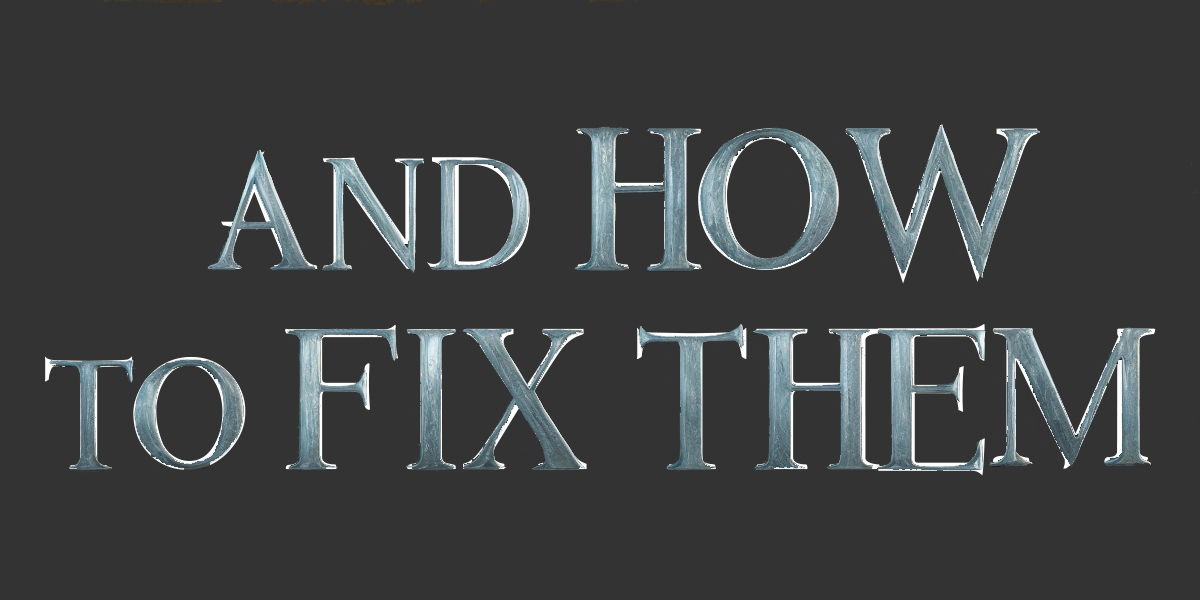
<style>
.page{position:relative;width:1200px;height:600px;background:#333333}
.page>*{position:absolute;margin:0}
.t1{font:166.7px "AnimalesFantastic"}
.t2{font:133.3px "AnimalesFantastic"}
</style>
<div class="page">
<p class="t1" style="left:45px;top:125px;width:1111px;height:351px"><span class="t2">and </span>how<br><span class="t2">to </span>fix them</p>
</div>
